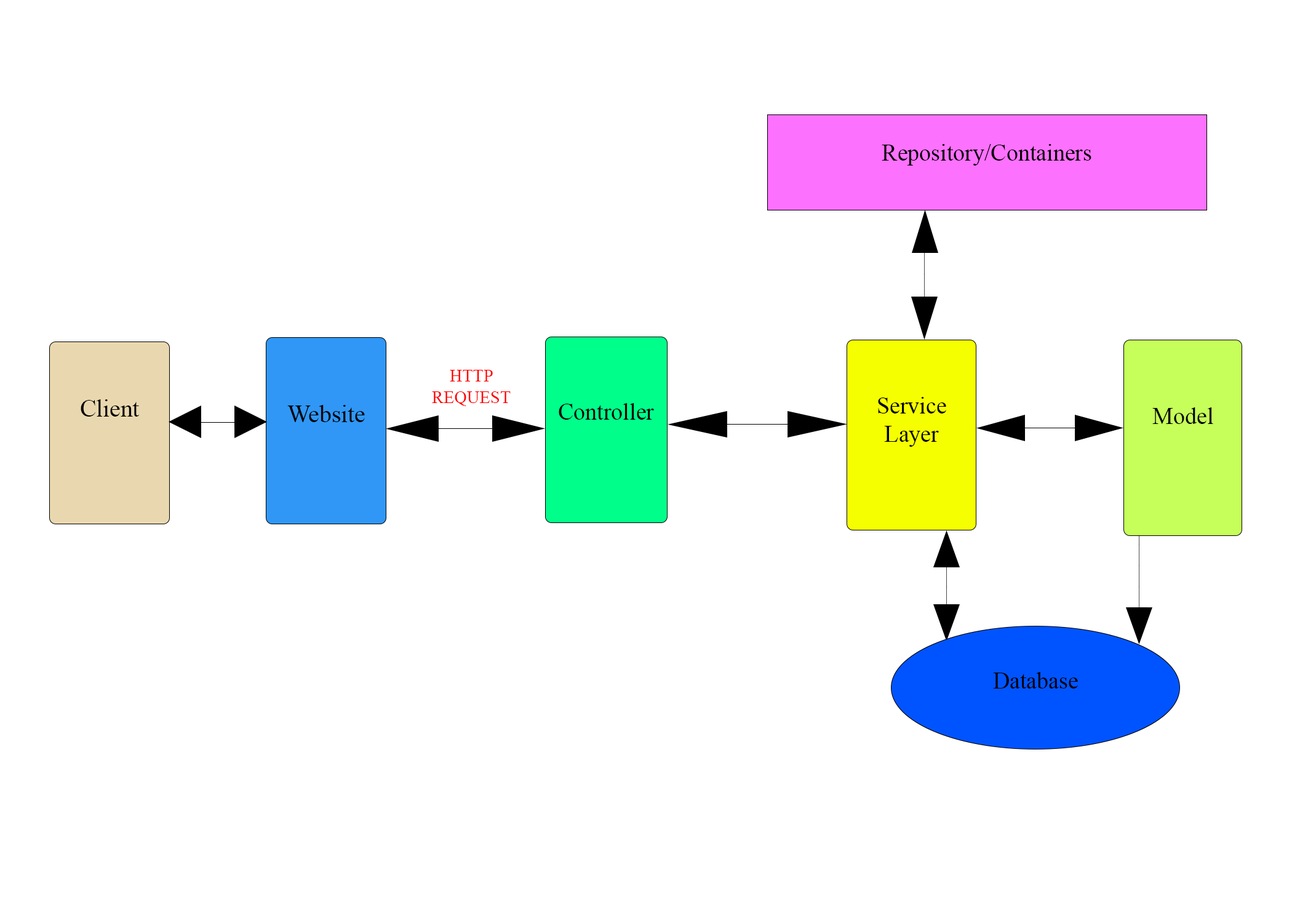
<style>
.page{position:relative;width:1292px;height:923px;background:#ffffff}
.page>*{position:absolute;margin:0}
.t1{font:23.4px "TimesNewRomanPSMT";color:#000000}
.t2{font:17.5px "TimesNewRomanPSMT";color:#ff0000}
.t3{font:24.4px "TimesNewRomanPSMT";color:#000000}
</style>
<div class="page">
<p class="t1" style="left:882px;top:144px;width:209px;height:22px">Repository/Containers</p>
<p class="t2" style="left:432px;top:370px;width:79px;height:36px;text-align:center">HTTP<br>REQUEST</p>
<p class="t3" style="left:81px;top:399px;width:58px;height:18px">Client</p>
<p class="t1" style="left:878px;top:397px;width:68px;height:50px;text-align:center">Service<br>Layer</p>
<p class="t3" style="left:287px;top:405px;width:78px;height:17px">Website</p>
<p class="t1" style="left:559px;top:403px;width:95px;height:17px">Controller</p>
<p class="t1" style="left:1152px;top:407px;width:61px;height:17px">Model</p>
<p class="t1" style="left:993px;top:672px;width:85px;height:16px">Database</p>
</div>
